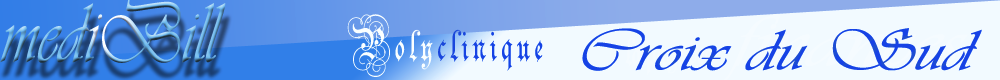
<style>
.page{position:relative;width:1000px;height:80px;background:#f2faff}
.page>*{position:absolute;margin:0}
.t1{font:88.1px "Vivaldii";scale:0.78 1}
.t2{font:60px "Vivaldii";color:#1e4ed0;scale:1.27 1}
</style>
<div class="page">
<p class="t1" style="left:0px;top:0px;width:226px;height:63px">mediBill</p>
<p class="t2" style="left:582px;top:28px;width:400px;height:43px">Croix du Sud</p>
</div>
